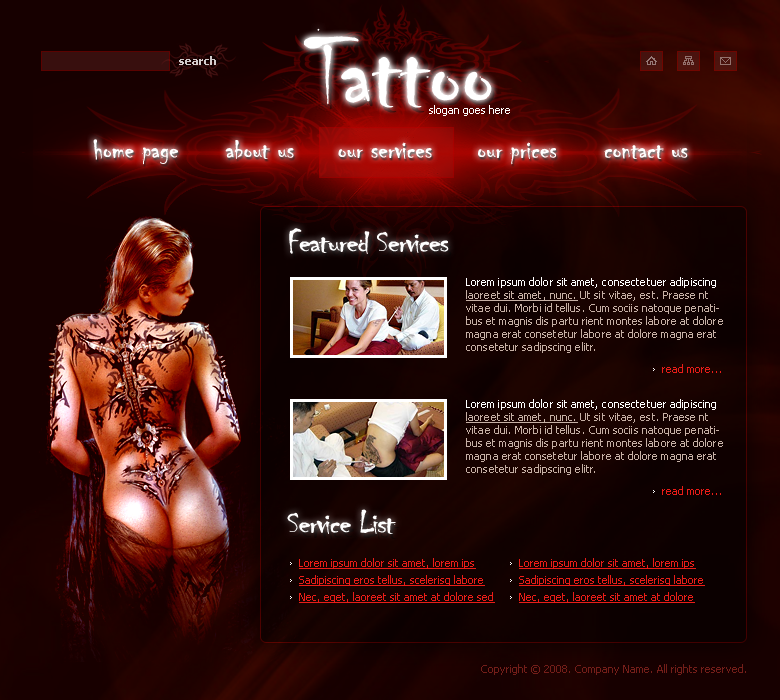
<style>
.page{position:relative;width:780px;height:700px}
.page>*{position:absolute;margin:0}
.t1{font:103.5px "Chiller-Regular";color:#ffffff}
.t2{font:11px "Tahoma-Bold";color:#d1cccc}
.t3{font:11px "Tahoma";color:#ffffff}
.t4{font:28px "Chiller-Regular";color:#ffffff}
.t5{font:32px "Chiller-Regular";letter-spacing:-0.04em;color:#ffffff;scale:1.14 1}
.t6{font:11px/13px "Tahoma";color:#c6b0a5}
.t7{font:11px/13px "Tahoma";color:#ffffff}
.t8{font:11px/13px "Tahoma";color:#c6b0a5;text-decoration:underline}
.t9{font:11px "Tahoma";color:#ea1d18}
.t10{font:11px "Tahoma";color:#ea1d18;text-decoration:underline}
.t11{font:11px "Tahoma";color:#741e19}
</style>
<div class="page">
<p class="t1" style="left:303px;top:28px;width:189px;height:80px">Tattoo</p>
<p class="t2" style="left:179px;top:56px;width:37px;height:9px">search</p>
<p class="t3" style="left:429px;top:105px;width:81px;height:11px">slogan goes here</p>
<p class="t4" style="left:93px;top:139px;width:85px;height:26px">home page</p>
<p class="t4" style="left:225px;top:140px;width:69px;height:19px">about us</p>
<p class="t4" style="left:338px;top:142px;width:94px;height:17px">our services</p>
<p class="t4" style="left:478px;top:142px;width:79px;height:23px">our prices</p>
<p class="t4" style="left:604px;top:145px;width:84px;height:14px">contact us</p>
<p class="t5" style="left:289px;top:228px;width:160px;height:26px">Featured Services</p>
<p class="t6" style="left:466px;top:277px;width:257px;height:76px"><span class="t7">Lorem ipsum dolor sit amet, consectetuer adipiscing </span><span class="t8">laoreet sit amet, nunc.</span> Ut sit vitae, est. Praese nt vitae dui. Morbi id tellus. Cum sociis natoque penatibus et magnis dis partu rient montes labore at dolore magna erat consetetur labore at dolore magna erat consetetur sadipscing elitr.</p>
<p class="t9" style="left:662px;top:364px;width:59px;height:9px">read more...</p>
<p class="t6" style="left:466px;top:399px;width:257px;height:76px"><span class="t7">Lorem ipsum dolor sit amet, consectetuer adipiscing </span><span class="t8">laoreet sit amet, nunc.</span> Ut sit vitae, est. Praese nt vitae dui. Morbi id tellus. Cum sociis natoque penatibus et magnis dis partu rient montes labore at dolore magna erat consetetur labore at dolore magna erat consetetur sadipscing elitr.</p>
<p class="t9" style="left:662px;top:486px;width:59px;height:9px">read more...</p>
<p class="t5" style="left:287px;top:509px;width:109px;height:25px">Service List</p>
<p class="t10" style="left:299px;top:558px;width:177px;height:11px">Lorem ipsum dolor sit amet, lorem ips</p>
<p class="t10" style="left:519px;top:558px;width:177px;height:11px">Lorem ipsum dolor sit amet, lorem ips</p>
<p class="t10" style="left:299px;top:575px;width:186px;height:11px">Sadipiscing eros tellus, scelerisq labore</p>
<p class="t10" style="left:519px;top:575px;width:186px;height:11px">Sadipiscing eros tellus, scelerisq labore</p>
<p class="t10" style="left:299px;top:592px;width:196px;height:11px">Nec, eget, laoreet sit amet at dolore sed</p>
<p class="t10" style="left:519px;top:592px;width:176px;height:11px">Nec, eget, laoreet sit amet at dolore</p>
<p class="t11" style="left:481px;top:664px;width:265px;height:11px">Copyright © 2008. Company Name. All rights reserved.</p>
</div>
